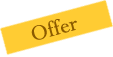
<style>
.page{position:relative;width:113px;height:57px;background:#ffffff}
.page>*{position:absolute;margin:0}
.t1{font:24px "Perpetua";color:#8b5a00}
</style>
<div class="page">
<p class="t1" style="left:31px;top:19px;width:46px;height:21px;rotate:-15deg">Offer</p>
</div>
